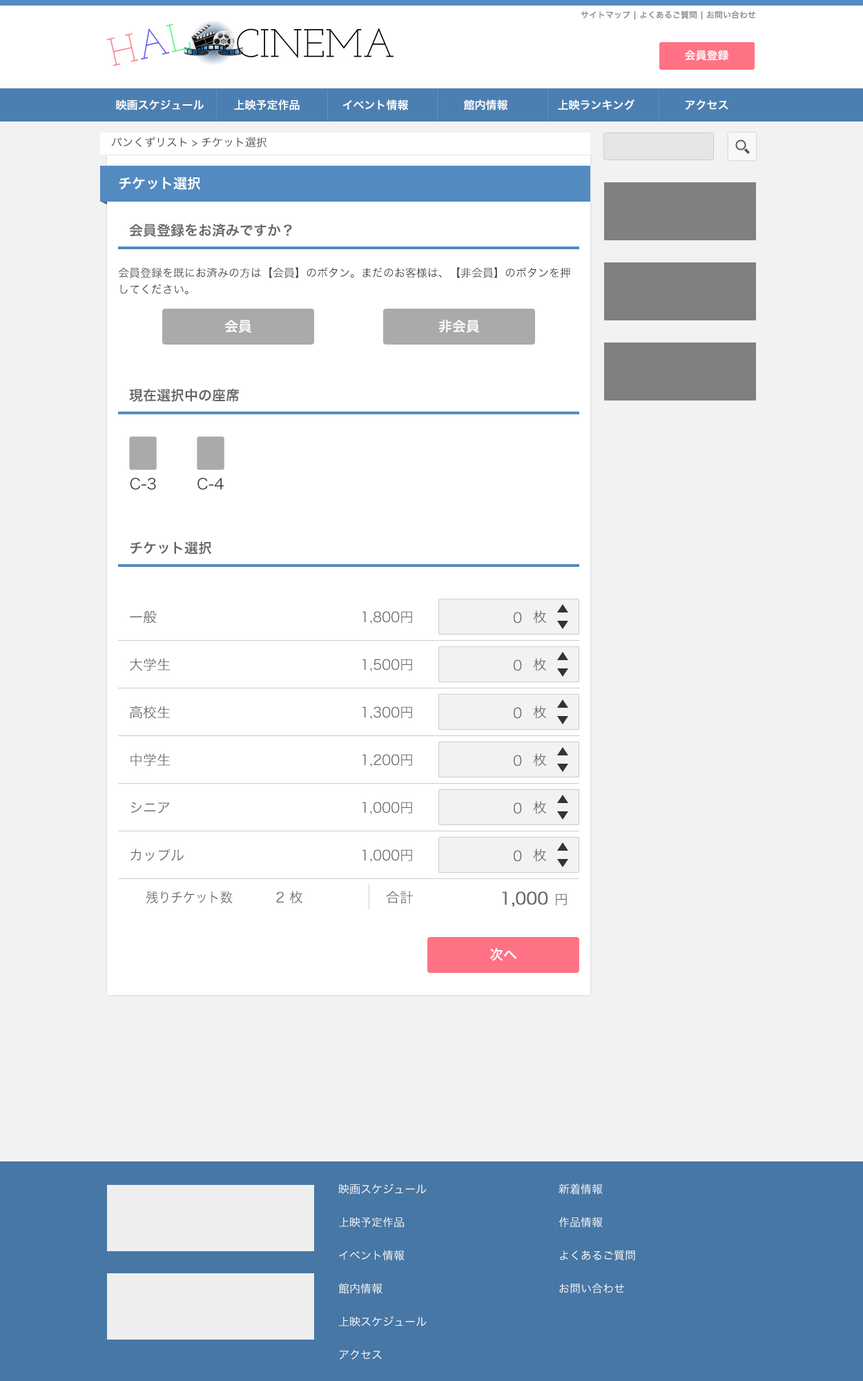
<style>
.page{position:relative;width:863px;height:1381px;background:#f2f2f2}
.page>*{position:absolute;margin:0}
.t1{font:8.3px "HiraKakuProN-W6";color:#888888}
.t2{font:11.1px "HiraKakuProN-W6";color:#ffffff}
.t3{font:11.1px "HiraKakuProN-W3";color:#333333}
.t4{font:13.8px "HiraKakuProN-W6";color:#ffffff}
.t5{font:13.8px "HiraKakuProN-W6";color:#666666}
.t6{font:11.1px/16.6px "HiraKakuProN-W3";color:#333333}
.t7{font:15.2px "HiraKakuProN-W3";color:#333333}
.t8{font:13.8px "HiraKakuProN-W3";color:#666666}
.t9{font:13.8px "HiraKakuProN-W3";color:#666666;scale:0.9 1}
.t10{font:16.6px "HiraKakuProN-W3";color:#666666;font-weight:bold}
.t11{font:11.1px/16.6px "HiraKakuProN-W3";color:#ffffff}
</style>
<div class="page">
<p class="t1" style="left:581px;top:10px;width:175px;height:10px">サイトマップ | よくあるご質問 | お問い合わせ</p>
<p class="t2" style="left:685px;top:50px;width:44px;height:11px">会員登録</p>
<p class="t2" style="left:116px;top:99px;width:88px;height:12px">映画スケジュール</p>
<p class="t2" style="left:234px;top:99px;width:66px;height:12px">上映予定作品</p>
<p class="t2" style="left:343px;top:99px;width:66px;height:12px">イベント情報</p>
<p class="t2" style="left:463px;top:99px;width:45px;height:12px">館内情報</p>
<p class="t2" style="left:558px;top:99px;width:77px;height:12px">上映ランキング</p>
<p class="t2" style="left:686px;top:99px;width:43px;height:11px">アクセス</p>
<p class="t3" style="left:111px;top:137px;width:156px;height:10px">パンくずリスト &gt; チケット選択</p>
<p class="t4" style="left:119px;top:177px;width:81px;height:13px">チケット選択</p>
<p class="t5" style="left:129px;top:224px;width:163px;height:13px">会員登録をお済みですか？</p>
<p class="t6" style="left:118px;top:267px;width:452px;height:27px">会員登録を既にお済みの方は【会員】のボタン。まだのお客様は、【非会員】のボタンを押してください。</p>
<p class="t4" style="left:224px;top:320px;width:28px;height:13px">会員</p>
<p class="t4" style="left:439px;top:320px;width:41px;height:13px">非会員</p>
<p class="t5" style="left:129px;top:389px;width:110px;height:13px">現在選択中の座席</p>
<p class="t7" style="left:130px;top:478px;width:26px;height:12px">C-3</p>
<p class="t7" style="left:198px;top:478px;width:26px;height:12px">C-4</p>
<p class="t5" style="left:130px;top:541px;width:81px;height:14px">チケット選択</p>
<p class="t8" style="left:130px;top:611px;width:27px;height:13px">一般</p>
<p class="t8" style="left:363px;top:611px;width:49px;height:13px">1,800円</p>
<p class="t8" style="left:514px;top:612px;width:8px;height:12px">0</p>
<p class="t8" style="left:533px;top:611px;width:14px;height:13px">枚</p>
<p class="t8" style="left:130px;top:658px;width:40px;height:13px">大学生</p>
<p class="t8" style="left:363px;top:659px;width:49px;height:13px">1,500円</p>
<p class="t8" style="left:514px;top:660px;width:8px;height:11px">0</p>
<p class="t8" style="left:533px;top:658px;width:14px;height:13px">枚</p>
<p class="t8" style="left:130px;top:706px;width:40px;height:13px">高校生</p>
<p class="t8" style="left:363px;top:707px;width:49px;height:13px">1,300円</p>
<p class="t8" style="left:514px;top:707px;width:8px;height:12px">0</p>
<p class="t8" style="left:533px;top:706px;width:14px;height:13px">枚</p>
<p class="t8" style="left:131px;top:753px;width:39px;height:14px">中学生</p>
<p class="t8" style="left:363px;top:754px;width:49px;height:13px">1,200円</p>
<p class="t8" style="left:514px;top:755px;width:8px;height:12px">0</p>
<p class="t8" style="left:533px;top:753px;width:14px;height:14px">枚</p>
<p class="t8" style="left:131px;top:802px;width:39px;height:12px">シニア</p>
<p class="t8" style="left:363px;top:802px;width:49px;height:13px">1,000円</p>
<p class="t8" style="left:514px;top:803px;width:8px;height:11px">0</p>
<p class="t8" style="left:533px;top:801px;width:14px;height:13px">枚</p>
<p class="t8" style="left:131px;top:849px;width:53px;height:12px">カップル</p>
<p class="t8" style="left:363px;top:849px;width:49px;height:14px">1,000円</p>
<p class="t8" style="left:514px;top:850px;width:8px;height:12px">0</p>
<p class="t8" style="left:533px;top:849px;width:14px;height:13px">枚</p>
<p class="t9" style="left:146px;top:891px;width:87px;height:13px">残りチケット数</p>
<p class="t8" style="left:276px;top:891px;width:27px;height:13px">2 枚</p>
<p class="t8" style="left:386px;top:891px;width:28px;height:13px">合計</p>
<p class="t10" style="left:502px;top:892px;width:65px;height:15px">1,000 <span class="t8">円</span></p>
<p class="t4" style="left:490px;top:948px;width:27px;height:13px">次へ</p>
<p class="t11" style="left:338px;top:1184px;width:89px;height:176px">映画スケジュール<br><br>上映予定作品<br><br>イベント情報<br><br>館内情報<br><br>上映スケジュール<br><br>アクセス</p>
<p class="t11" style="left:559px;top:1184px;width:76px;height:110px">新着情報<br><br>作品情報<br><br>よくあるご質問<br><br>お問い合わせ</p>
</div>
